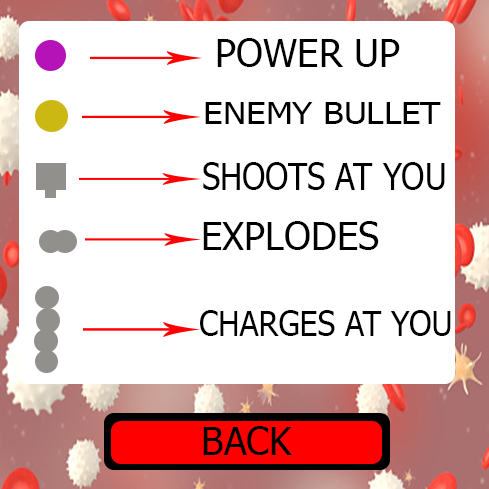
<style>
.page{position:relative;width:489px;height:489px;background:#ffffff}
.page>*{position:absolute;margin:0}
.t1{font:38px "Tahoma";color:#000000}
.t2{font:29.9px "Tahoma";color:#000000;scale:1.16 1}
.t3{font:37px "Tahoma";color:#000000;scale:0.89 1}
.t4{font:33.7px "Tahoma";color:#000000;scale:0.94 1}
</style>
<div class="page">
<p class="t1" style="left:217px;top:38px;width:183px;height:29px">POWER UP</p>
<p class="t2" style="left:205px;top:102px;width:236px;height:22px">ENEMY BULLET</p>
<p class="t3" style="left:203px;top:162px;width:242px;height:28px">SHOOTS AT YOU</p>
<p class="t1" style="left:203px;top:221px;width:176px;height:29px">EXPLODES</p>
<p class="t4" style="left:200px;top:310px;width:251px;height:26px">CHARGES AT YOU</p>
<p class="t1" style="left:203px;top:426px;width:89px;height:29px">BACK</p>
</div>
